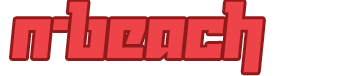
<style>
.page{position:relative;width:346px;height:76px;background:#ffffff}
.page>*{position:absolute;margin:0}
.t1{font:72px "Yukarimobile";color:#ed4349}
</style>
<div class="page">
<p class="t1" style="left:12px;top:1px;width:251px;height:72px">N-Beach</p>
</div>
